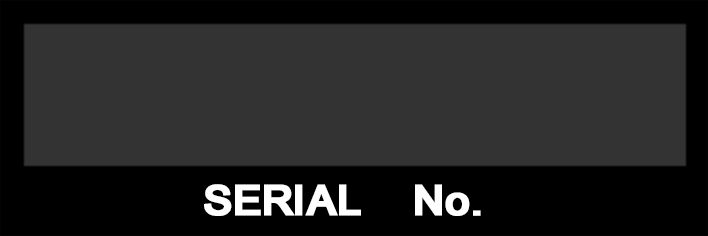
<style>
.page{position:relative;width:708px;height:236px;background:#333333}
.page>*{position:absolute;margin:0}
.t1{font:41.7px "ER-UniversKOI-8Bold";color:#ffffff;font-weight:bold}
</style>
<div class="page">
<p class="t1" style="left:204px;top:184px;width:277px;height:32px">SERIAL    No.</p>
</div>
